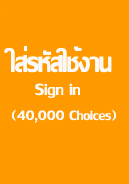
<style>
.page{position:relative;width:129px;height:184px;background:#fe9900}
.page>*{position:absolute;margin:0}
.t1{font:36px "LilyUPC";color:#fbfaf8}
.t2{font:24px "LilyUPC";color:#fbfaf8}
.t3{font:20px "LilyUPC";color:#fbfaf8}
</style>
<div class="page">
<p class="t1" style="left:4px;top:47px;width:108px;height:26px">ใส่รหัสใช้งาน</p>
<p class="t1" style="left:4px;top:46px;width:108px;height:26px">ใส่รหัสใช้งาน</p>
<p class="t2" style="left:35px;top:83px;width:45px;height:15px">Sign in</p>
<p class="t3" style="left:12px;top:110px;width:104px;height:13px">(40,000 Choices)</p>
</div>
